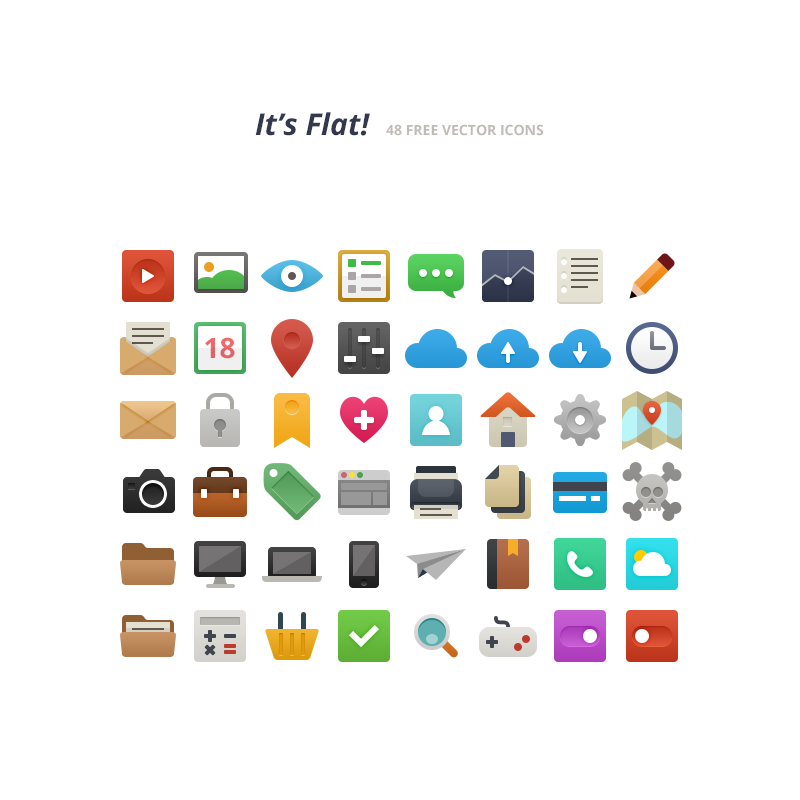
<style>
.page{position:relative;width:800px;height:800px;background:#ffffff}
.page>*{position:absolute;margin:0}
.t1{font:30px "OpenSans-BoldItalic";color:#32394d}
.t2{font:14px "OpenSans-Bold";color:#bfbcb3;text-transform:uppercase}
.t3{font:28px "OpenSans-Bold";color:#f0686b;text-transform:uppercase}
</style>
<div class="page">
<p class="t1" style="left:255px;top:112px;width:115px;height:24px">It’s Flat!</p>
<p class="t2" style="left:386px;top:124px;width:158px;height:12px">48 FREE VECTOR ICONS</p>
<p class="t3" style="left:205px;top:337px;width:30px;height:22px">18</p>
</div>
